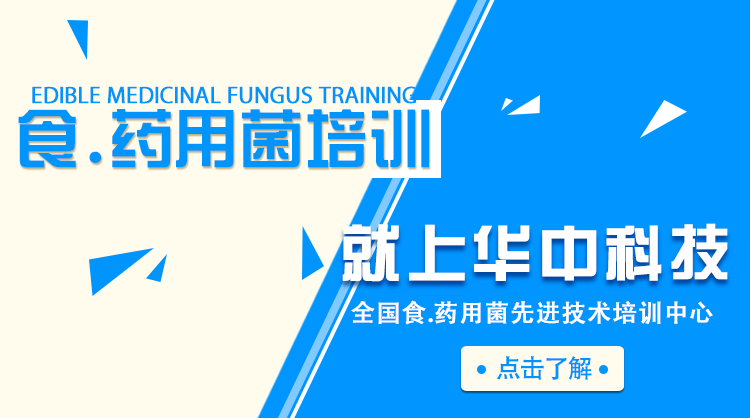
<style>
.page{position:relative;width:750px;height:418px;background:#fffbed}
.page>*{position:absolute;margin:0}
.t1{font:24px "MyriadPro-Regular";letter-spacing:-0.01em;color:#0094fd;text-transform:uppercase;font-weight:bold}
.t2{font:64.3px "HYk1gj";letter-spacing:-0.01em;color:#0094fd;text-transform:uppercase}
.t3{font:62px "FZZYJW--GB1-0";letter-spacing:-0.01em;color:#ffffff;text-transform:uppercase;font-weight:bold}
.t4{font:24.3px "AdobeHeitiStd-Regular";letter-spacing:-0.01em;color:#ffffff;text-transform:uppercase;font-weight:bold}
.t5{font:25.8px "AdobeHeitiStd-Regular";letter-spacing:-0.075em;color:#0094fd;font-weight:bold}
</style>
<div class="page">
<p class="t1" style="left:32px;top:86px;width:384px;height:18px">Edible medicinal fungus training</p>
<p class="t2" style="left:18px;top:109px;width:411px;height:59px">食.药用菌培训</p>
<p class="t3" style="left:342px;top:223px;width:386px;height:59px">就上华中科技</p>
<p class="t4" style="left:351px;top:300px;width:362px;height:25px">全国食.药用菌先进技术培训中心</p>
<p class="t5" style="left:497px;top:356px;width:95px;height:24px">点击了解</p>
</div>
